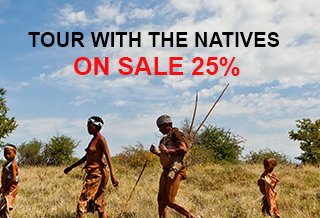
<style>
.page{position:relative;width:320px;height:218px}
.page>*{position:absolute;margin:0}
.t1{font:20.1px "Arial-BoldMT";color:#000000}
.t2{font:25px/28px "Arial-BoldMT";color:#f70f0f}
</style>
<div class="page">
<p class="t1" style="left:28px;top:32px;width:252px;height:44px;text-align:center">TOUR WITH THE NATIVES <br><span class="t2">ON SALE 25%</span></p>
</div>
